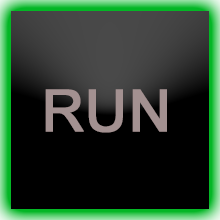
<style>
.page{position:relative;width:220px;height:220px;background:#000000}
.page>*{position:absolute;margin:0}
.t1{font:58.3px "ArialMT";color:#a49191;font-weight:bold}
</style>
<div class="page">
<p class="t1" style="left:45px;top:89px;width:122px;height:44px">RUN</p>
</div>
